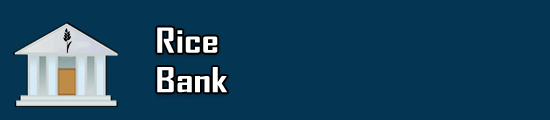
<style>
.page{position:relative;width:550px;height:120px;background:#043654}
.page>*{position:absolute;margin:0}
.t1{font:32.9px "AgencyFB-Bold";color:#ffffff;scale:1.33 1}
</style>
<div class="page">
<p class="t1" style="left:157px;top:27px;width:71px;height:66px">Rice <br>Bank</p>
</div>
